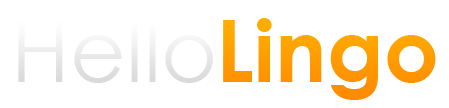
<style>
.page{position:relative;width:449px;height:108px;background:#ffffff}
.page>*{position:absolute;margin:0}
.t1{font:86.5px "CenturyGothic";color:#eaeaea}
.t2{font:86.5px "CenturyGothic-Bold";color:#ff9b00}
</style>
<div class="page">
<p class="t1" style="left:18px;top:19px;width:195px;height:64px">Hello</p>
<p class="t2" style="left:223px;top:18px;width:213px;height:82px">Lingo</p>
</div>
